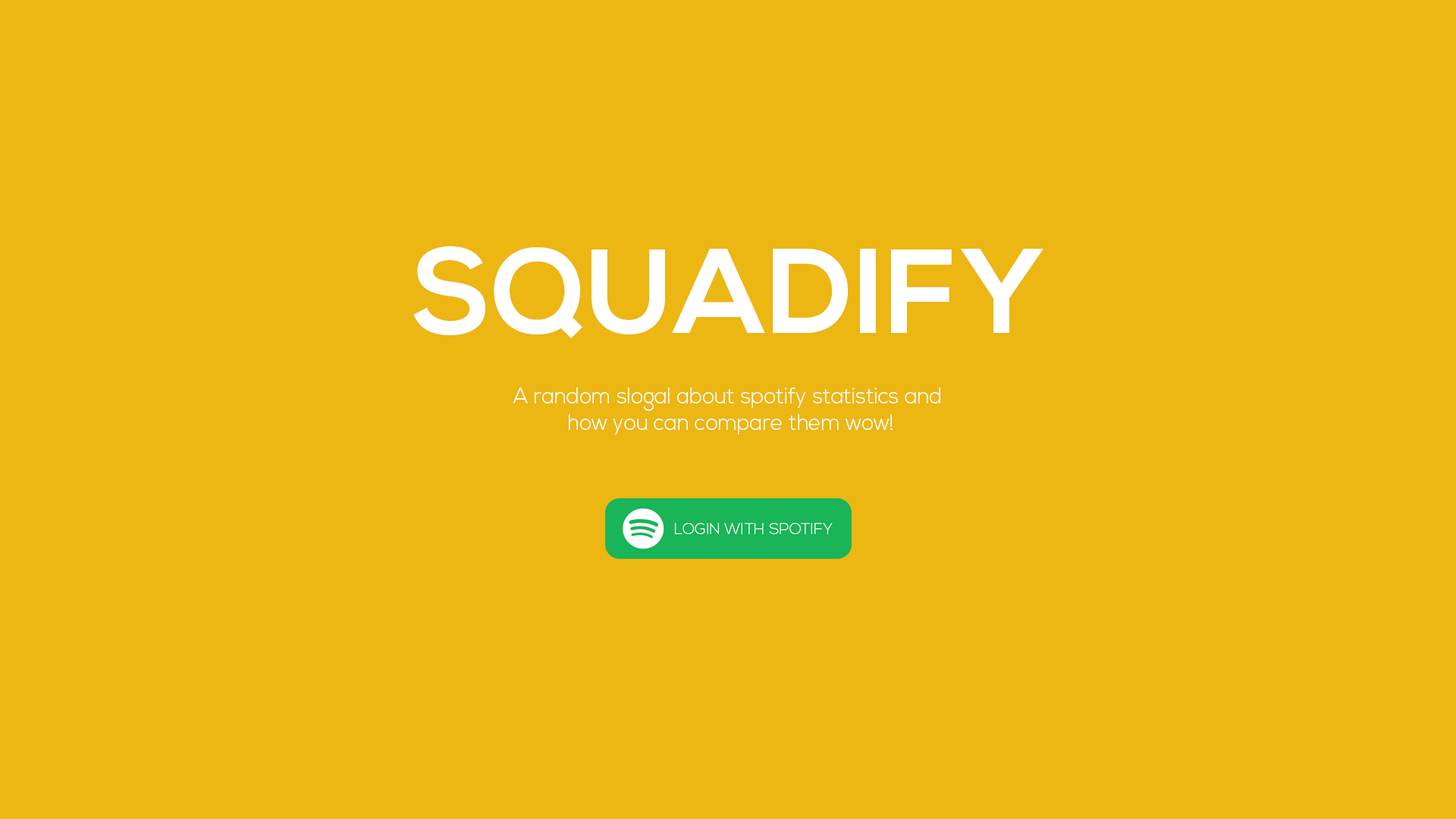
<style>
.page{position:relative;width:1456px;height:819px;background:#ecb613}
.page>*{position:absolute;margin:0}
.t1{font:119.8px "NexaBold";color:#ffffff}
.t2{font:22.4px "NexaLight";color:#ffffff;scale:0.93 1}
</style>
<div class="page">
<p class="t1" style="left:413px;top:246px;width:630px;height:92px">SQUADIFY</p>
<p class="t2" style="left:513px;top:388px;width:427px;height:47px;text-align:center">A random slogal about spotify statistics and <br>how you can compare them wow!</p>
</div>
